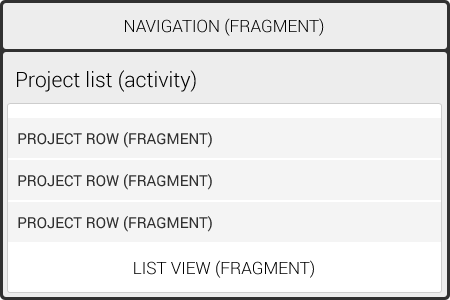
<style>
.page{position:relative;width:450px;height:300px;background:#f4f4f4}
.page>*{position:absolute;margin:0}
.t1{font:17px "Roboto-Light";color:#000000;text-transform:uppercase}
.t2{font:21px "Roboto-Light";color:#000000}
.t3{font:15px "Roboto-Regular";color:#313131;text-transform:uppercase}
</style>
<div class="page">
<p class="t1" style="left:125px;top:18px;width:199px;height:18px">Navigation (fragment)</p>
<p class="t2" style="left:17px;top:70px;width:179px;height:22px">Project list (activity)</p>
<p class="t3" style="left:18px;top:132px;width:194px;height:16px">Project row (Fragment)</p>
<p class="t3" style="left:18px;top:174px;width:194px;height:16px">Project row (Fragment)</p>
<p class="t3" style="left:18px;top:216px;width:194px;height:16px">Project row (Fragment)</p>
<p class="t1" style="left:134px;top:260px;width:180px;height:18px">LIST VIEW (FRAGMENT)</p>
</div>
